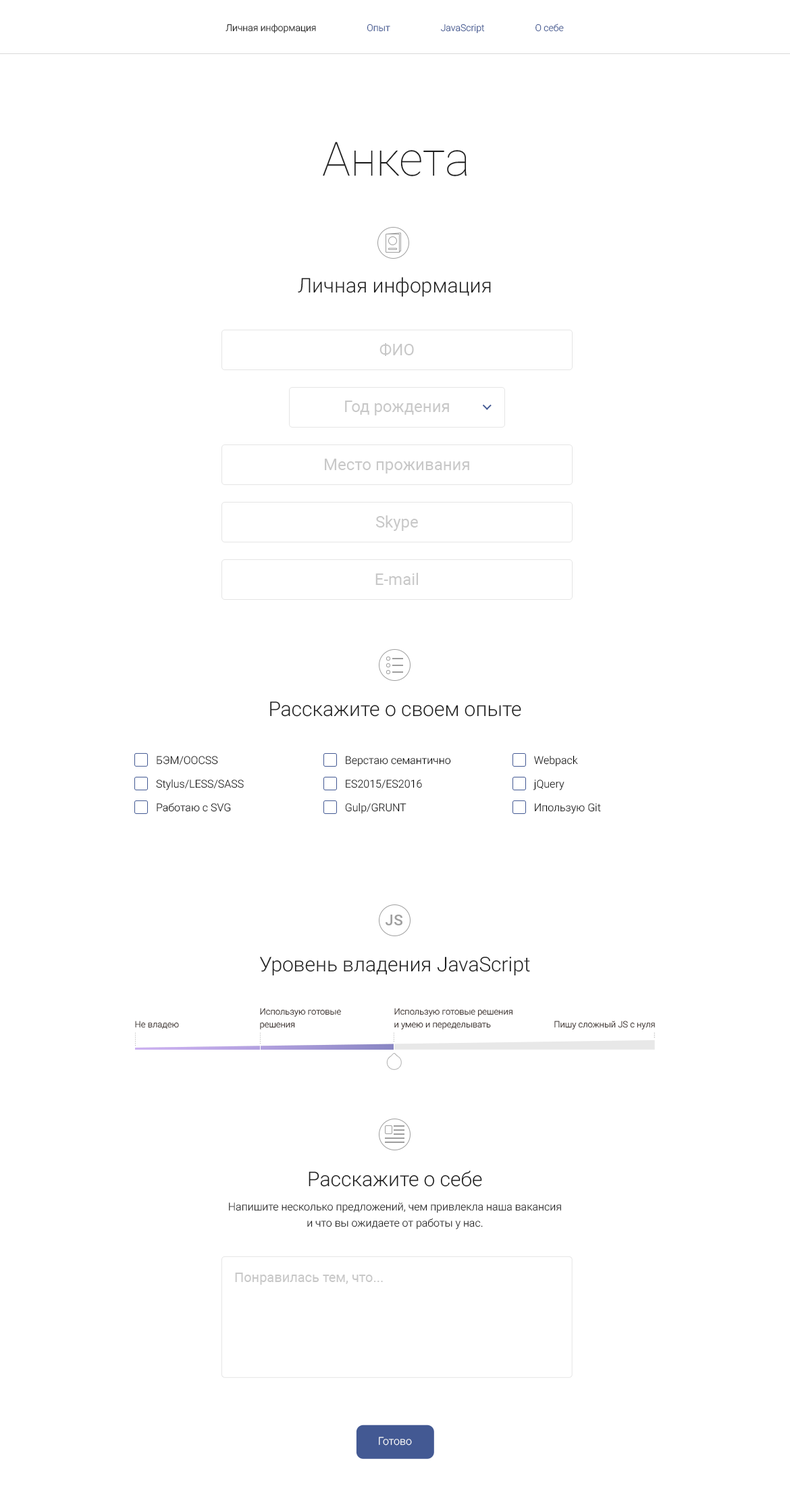
<style>
.page{position:relative;width:790px;height:1509px;background:#ffffff}
.page>*{position:absolute;margin:0}
.t1{font:9.5px "Roboto-Light";color:#1c1c1c}
.t2{font:47.3px "Roboto-Thin";color:#1c1c1c}
.t3{font:20.3px "Roboto-Light";color:#1c1c1c}
.t4{font:16.2px "Roboto-Regular";color:#c8c8c8}
.t5{font:10.8px/23.6px "Roboto-Light";color:#000000}
.t6{font:8.8px/12.8px "Roboto-Light"}
.t7{font:8.8px/12.8px "Roboto-Light";color:#2e211c}
.t8{font:8.8px "Roboto-Light"}
.t9{font:10.8px/16.2px "Roboto-Light";color:#1c1c1c}
.t10{font:13.5px "Roboto-Regular";color:#c8c8c8}
.t11{font:10.8px "Roboto-Light";color:#ffffff}
</style>
<div class="page">
<p class="t1" style="left:226px;top:24px;width:338px;height:9px">Личная информация                      Опыт                      JavaScript                      О себе</p>
<p class="t2" style="left:323px;top:142px;width:144px;height:34px">Анкета</p>
<p class="t3" style="left:298px;top:277px;width:193px;height:20px">Личная информация</p>
<p class="t4" style="left:380px;top:343px;width:34px;height:13px">ФИО</p>
<p class="t4" style="left:345px;top:401px;width:104px;height:14px">Год рождения</p>
<p class="t4" style="left:325px;top:459px;width:144px;height:14px">Место проживания</p>
<p class="t4" style="left:376px;top:515px;width:42px;height:16px">Skype</p>
<p class="t4" style="left:376px;top:573px;width:42px;height:12px">E-mail</p>
<p class="t3" style="left:270px;top:701px;width:251px;height:16px">Расскажите о своем опыте</p>
<p class="t5" style="left:156px;top:756px;width:88px;height:56px">БЭМ/OOCSS<br>Stylus/LESS/SASS<br>Работаю с SVG</p>
<p class="t5" style="left:345px;top:756px;width:106px;height:58px">Верстаю семантично<br>ES2015/ES2016<br>Gulp/GRUNT</p>
<p class="t5" style="left:533px;top:755px;width:68px;height:59px">Webpack<br>jQuery<br>Ипользую Git</p>
<p class="t3" style="left:260px;top:956px;width:270px;height:20px">Уровень владения JavaScript</p>
<p class="t6" style="left:260px;top:1008px;width:81px;height:21px">Использую готовые<br>решения</p>
<p class="t7" style="left:394px;top:1008px;width:119px;height:21px">Использую готовые решения<br>и умею и переделывать</p>
<p class="t8" style="left:135px;top:1021px;width:44px;height:8px">Не владею</p>
<p class="t8" style="left:555px;top:1021px;width:100px;height:8px">Пишу сложный JS с нуля</p>
<p class="t3" style="left:309px;top:1171px;width:173px;height:16px">Расскажите о себе</p>
<p class="t9" style="left:229px;top:1202px;width:332px;height:27px;text-align:center">Напишите несколько предложений, чем привлекла наша вакансия<br>и что вы ожидаете от работы у нас.</p>
<p class="t10" style="left:235px;top:1273px;width:148px;height:12px">Понравилась тем, что...</p>
<p class="t11" style="left:379px;top:1437px;width:33px;height:8px">Готово</p>
</div>
